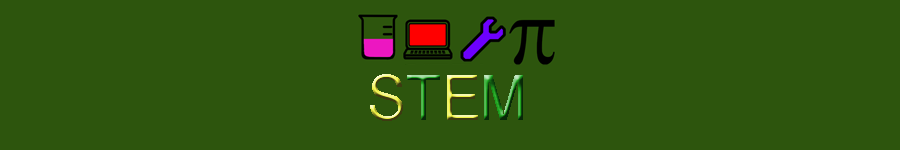
<style>
.page{position:relative;width:900px;height:150px;background:#2d550d}
.page>*{position:absolute;margin:0}
.t1{font:63.1px "ArialMT";scale:0.92 1}
</style>
<div class="page">
<p class="t1" style="left:370px;top:74px;width:153px;height:47px">STEM</p>
</div>
